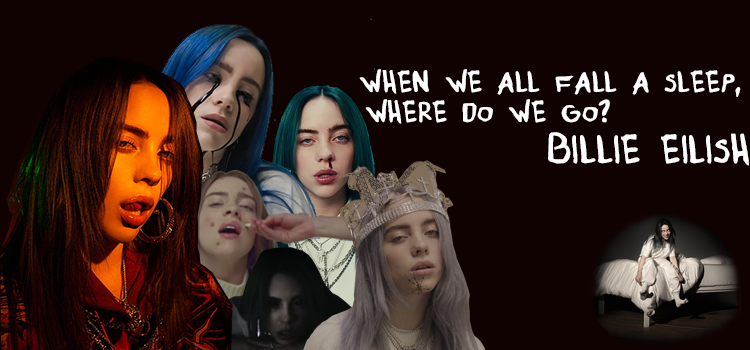
<style>
.page{position:relative;width:750px;height:350px;background:#100201}
.page>*{position:absolute;margin:0}
.t1{font:33.3px/10px "Whenweallfallasleep-Regular";color:#ffffff}
.t2{font:44.4px/10px "Whenweallfallasleep-Regular";color:#ffffff}
</style>
<div class="page">
<p class="t1" style="left:359px;top:69px;width:390px;height:97px;text-align:center">WHEN WE ALL FALL A SLEEP,<br><br><br> WHERE DO WE GO?<br><br><br><br><span class="t2">BILLIE EILISH</span></p>
</div>
